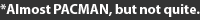
<style>
.page{position:relative;width:200px;height:20px;background:#333333}
.page>*{position:absolute;margin:0}
.t1{font:13.8px "MyriadPro-Bold";color:#fffefe}
</style>
<div class="page">
<p class="t1" style="left:0px;top:4px;width:200px;height:13px">*Almost PACMAN, but not quite.</p>
</div>
